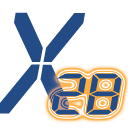
<style>
.page{position:relative;width:128px;height:128px;background:#ffffff}
.page>*{position:absolute;margin:0}
.t1{font:139.5px "QuiverItal";color:#234c86;scale:1.25 1}
.t2{font:56.8px "QuiverItal";color:#234c86;scale:1.25 1}
</style>
<div class="page">
<p class="t1" style="left:0px;top:12px;width:85px;height:102px">X</p>
<p class="t2" style="left:51px;top:73px;width:71px;height:42px">2B</p>
</div>
